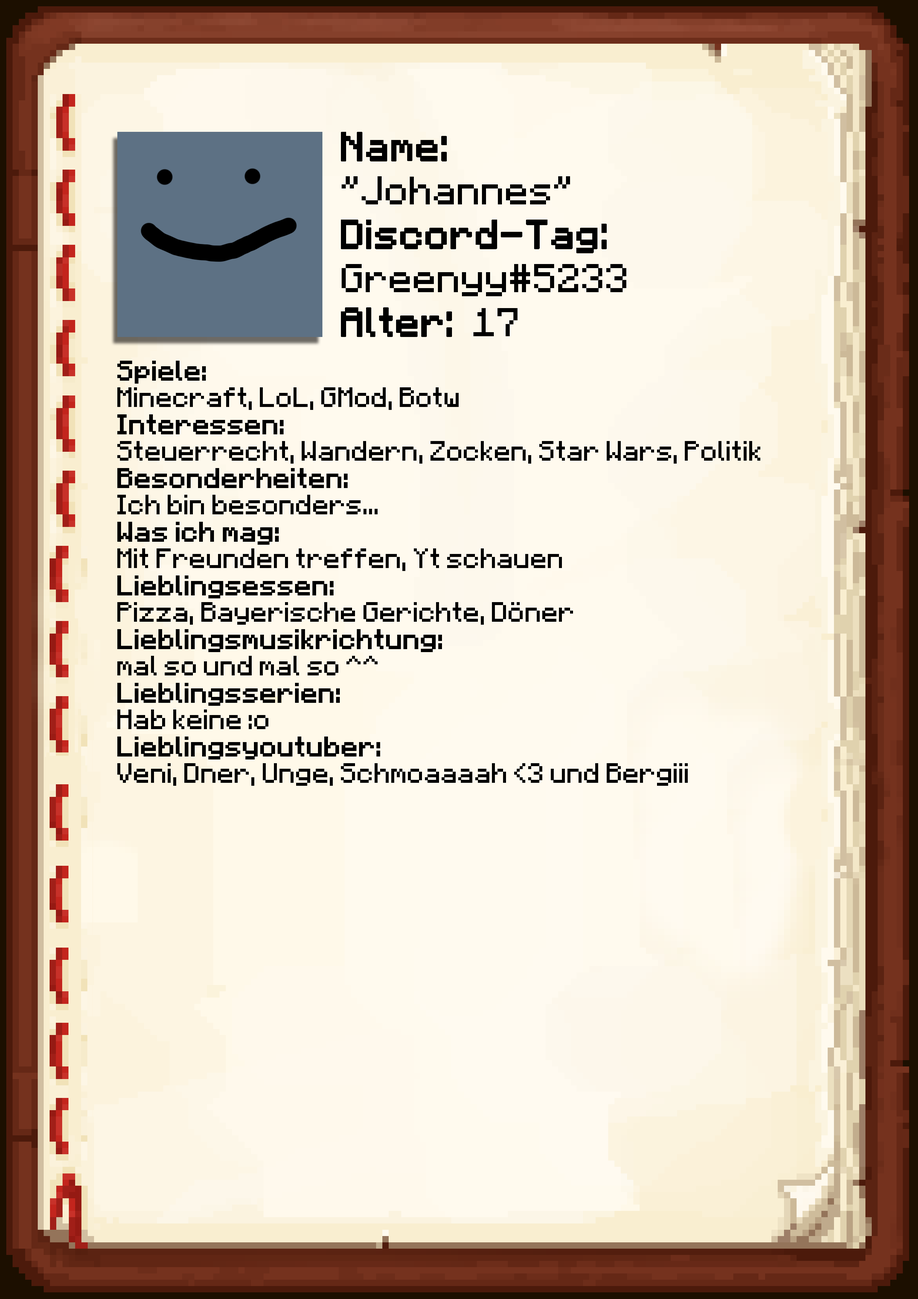
<style>
.page{position:relative;width:918px;height:1299px}
.page>*{position:absolute;margin:0}
.t1{font:40.1px/43.9px "Minecraft-Regular";color:#000000;font-weight:bold}
.t2{font:40.1px/43.9px "Minecraft-Regular";color:#000000}
.t3{font:22.4px "Minecraft";color:#000000}
.t4{font:22.4px "Minecraft";color:#000000;font-weight:bold}
</style>
<div class="page">
<p class="t1" style="left:341px;top:132px;width:285px;height:205px">Name:<br><span class="t2">"Johannes"<br></span>Discord-Tag:<br><span class="t2">Greenyy#5233<br></span>Alter: <span class="t2">17</span></p>
<p class="t3" style="left:117px;top:361px;width:643px;height:425px"><span class="t4">Spiele: <br></span>Minecraft, LoL, GMod, Botw<br><span class="t4">Interessen:<br></span>Steuerrecht, Wandern, Zocken, Star Wars, Politik<br><span class="t4">Besonderheiten:<br></span>Ich bin besonders...<br><span class="t4">Was ich mag:<br></span>Mit Freunden treffen, Yt schauen<br><span class="t4">Lieblingsessen:<br></span>Pizza, Bayerische Gerichte, Döner<br><span class="t4">Lieblingsmusikrichtung:<br></span>mal so und mal so ^^<br><span class="t4">Lieblingsserien:<br></span>Hab keine :o<br><span class="t4">Lieblingsyoutuber:<br></span>Veni, Dner, Unge, Schmoaaaah &lt;3 und Bergiii</p>
</div>
